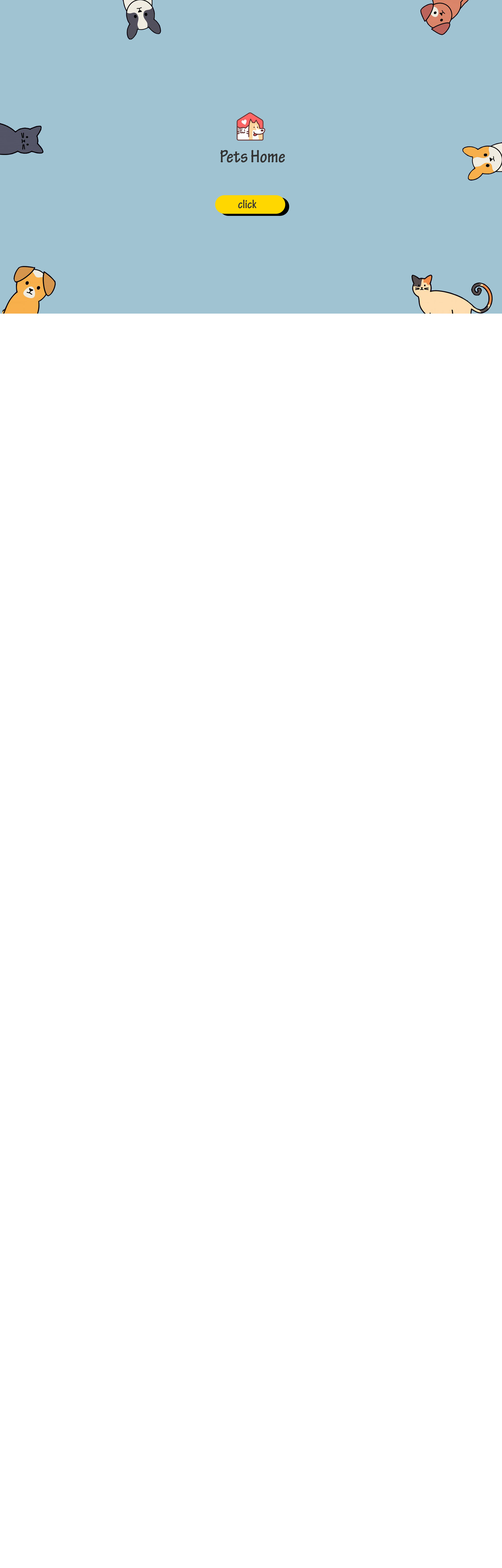
<style>
.page{position:relative;width:502px;height:1568px;background:#ffffff}
.page>*{position:absolute;margin:0}
.t1{font:18.8px "TektonPro-BoldCond";color:#333333}
.t2{font:12.5px "TektonPro-BoldCond";color:#333333}
</style>
<div class="page">
<p class="t1" style="left:220px;top:150px;width:65px;height:13px">Pets Home</p>
<p class="t2" style="left:238px;top:200px;width:18px;height:8px">click</p>
</div>
